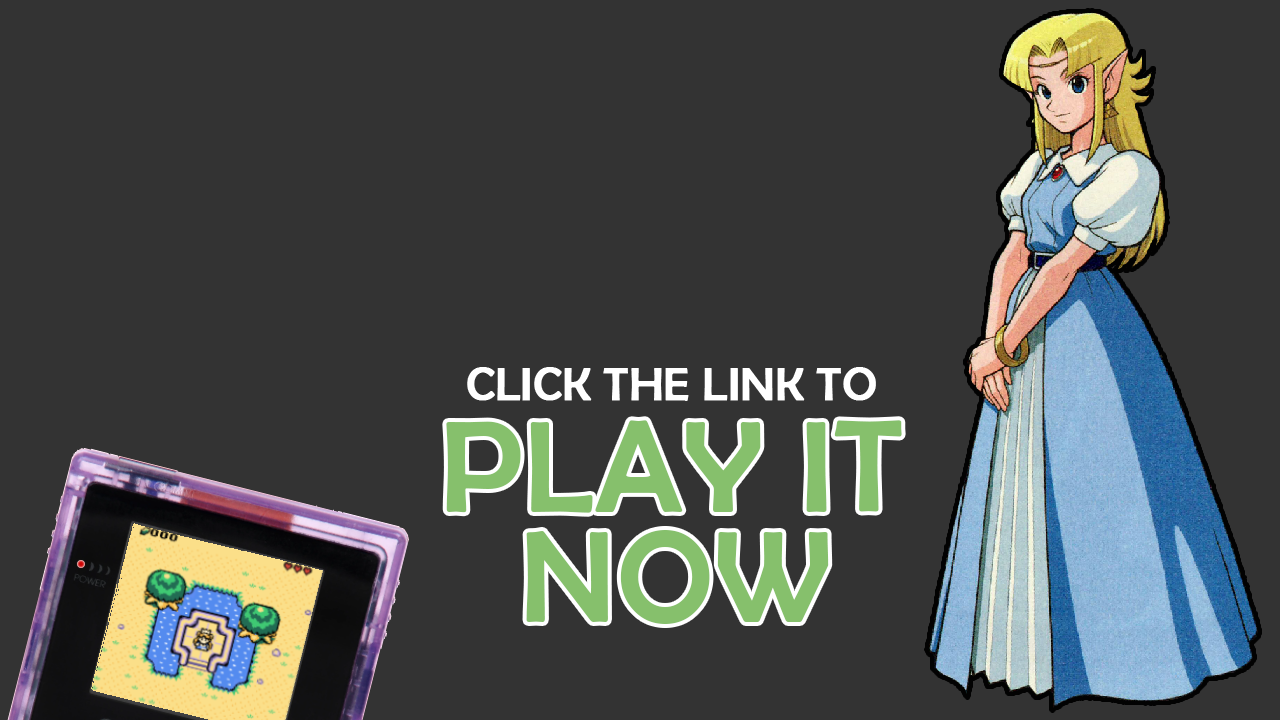
<style>
.page{position:relative;width:1280px;height:720px;background:#333333}
.page>*{position:absolute;margin:0}
.t1{font:45.9px "BerlinSansFB-Reg";color:#ffffff;font-weight:bold}
.t2{font:129.3px "BerlinSansFB-Reg";color:#86c06c;font-weight:bold}
</style>
<div class="page">
<p class="t1" style="left:467px;top:367px;width:409px;height:34px">CLICK THE LINK TO</p>
<p class="t2" style="left:446px;top:420px;width:456px;height:93px">PLAY IT</p>
<p class="t2" style="left:526px;top:530px;width:303px;height:94px">NOW</p>
</div>
